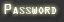
<style>
.page{position:relative;width:64px;height:22px;background:#333333}
.page>*{position:absolute;margin:0}
.t1{font:15px "OCRAExtended";color:#ffffff;font-variant:small-caps}
</style>
<div class="page">
<p class="t1" style="left:4px;top:4px;width:53px;height:10px">Password</p>
</div>
